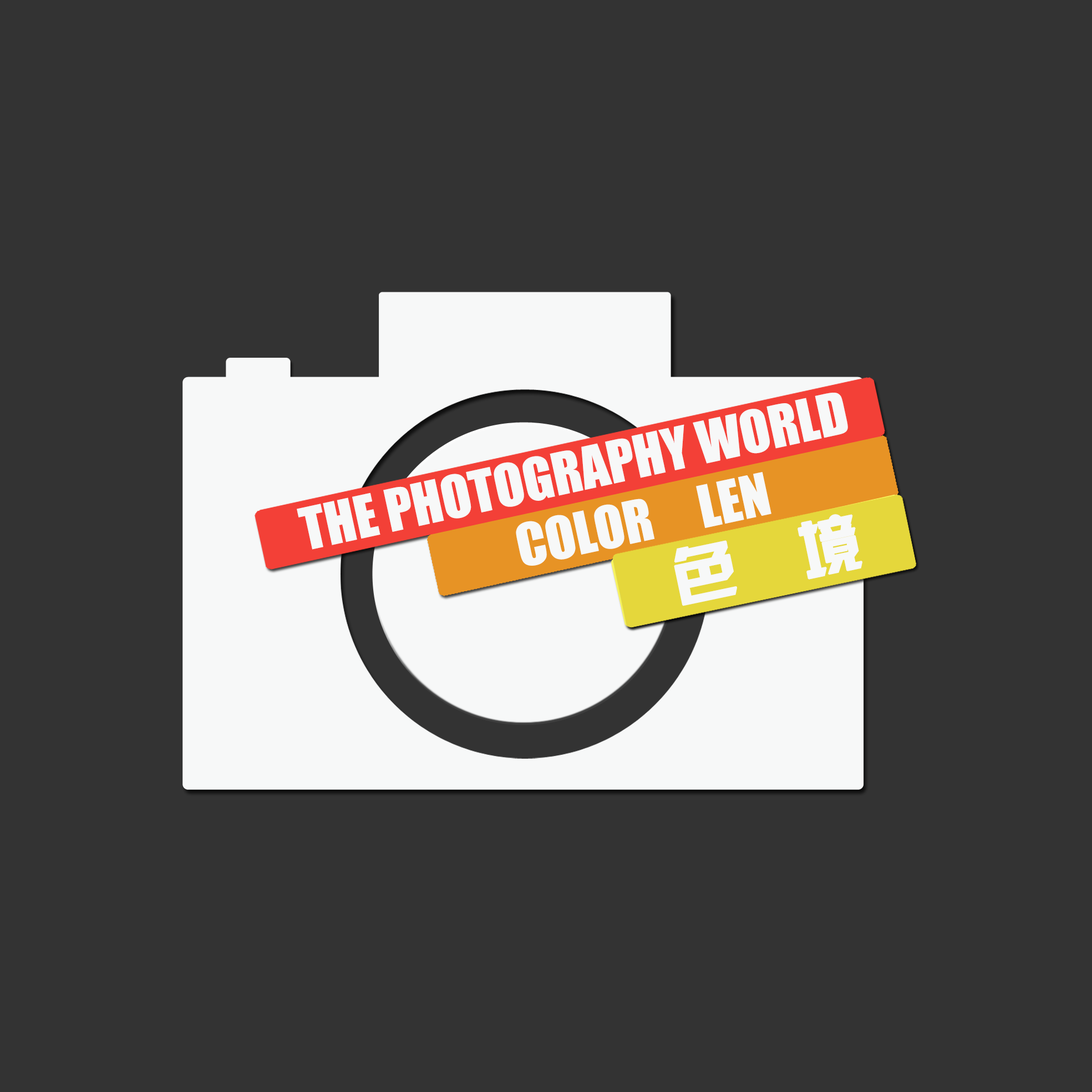
<style>
.page{position:relative;width:1092px;height:1092px;background:#333333}
.page>*{position:absolute;margin:0}
.t1{font:53.9px "Impact";color:#f7f8f8}
.t2{font:61.6px "JLinXin";color:#f7f8f8;font-weight:bold}
</style>
<div class="page">
<p class="t1" style="left:297px;top:393px;width:551px;height:157px;rotate:-12deg">THE PHOTOGRAPHY WORLD</p>
<p class="t1" style="left:516px;top:472px;width:255px;height:94px;rotate:-12deg">COLOR     LEN</p>
<p class="t2" style="left:674px;top:514px;width:188px;height:92px;rotate:-12deg">色  境</p>
</div>
